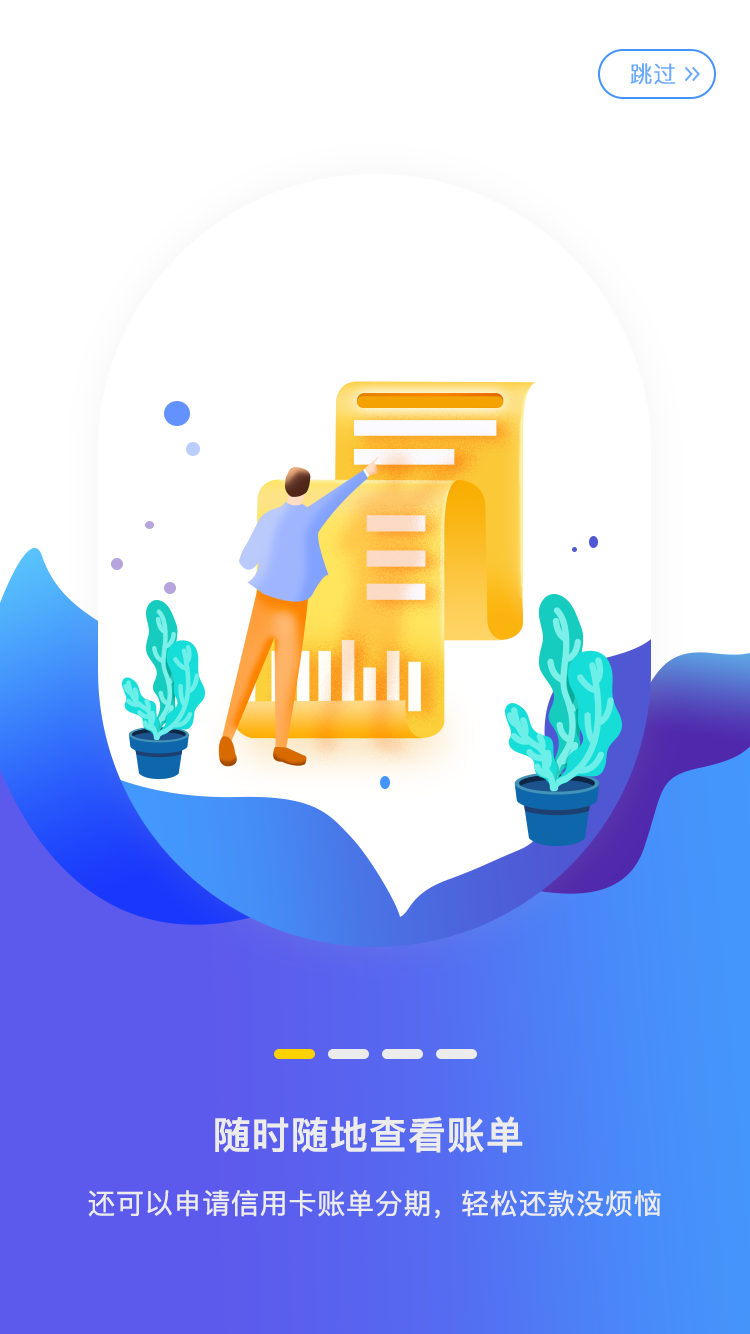
<style>
.page{position:relative;width:750px;height:1334px;background:#ffffff}
.page>*{position:absolute;margin:0}
.t1{font:22.6px "PingFang-SC-Regular";letter-spacing:0.02em;color:#6aa9fd;font-weight:bold}
.t2{font:38px "PingFang-SC-Bold";color:#ececec;font-weight:bold}
.t3{font:28px "PingFang-SC-Medium";color:#ececec;font-weight:bold}
</style>
<div class="page">
<p class="t1" style="left:630px;top:63px;width:46px;height:22px">跳过</p>
<p class="t2" style="left:215px;top:1116px;width:308px;height:37px">随时随地查看账单</p>
<p class="t3" style="left:88px;top:1190px;width:573px;height:29px">还可以申请信用卡账单分期，轻松还款没烦恼</p>
</div>
